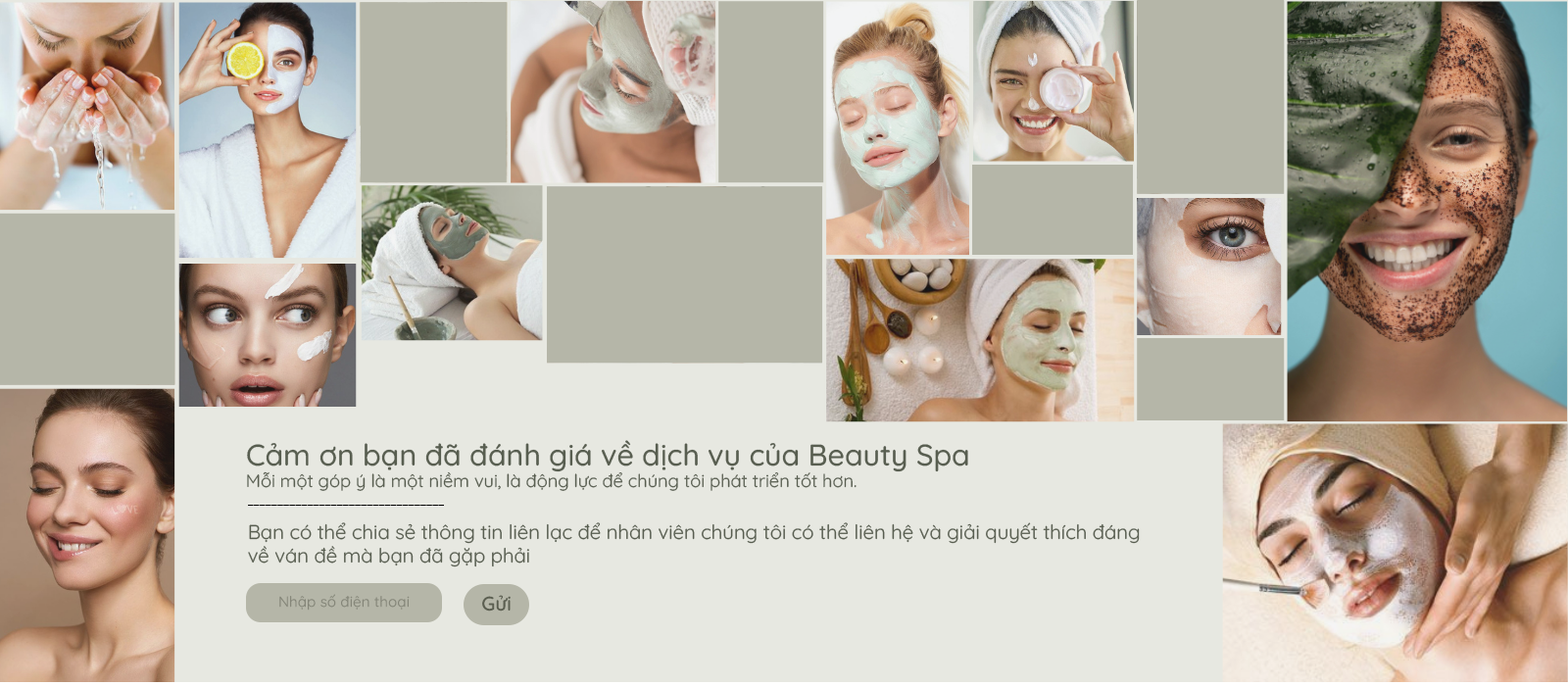
<style>
.page{position:relative;width:1568px;height:686px;background:#e7e8e1}
.page>*{position:absolute;margin:0}
.t1{font:17.9px "Quicksand-Regular";color:#585e50}
.t2{font:29.8px "Quicksand-Medium";color:#585e50}
.t3{font:19.9px "Quicksand-Regular";color:#585e50}
.t4{font:14.9px "Quicksand-Medium";color:#858679}
.t5{font:19.9px "Quicksand-SemiBold";color:#5b5e50}
</style>
<div class="page">
<p class="t1" style="left:247px;top:440px;width:721px;height:51px"><span class="t2">Cảm ơn bạn đã đánh giá về dịch vụ của Beauty Spa<br></span>Mỗi một góp ý là một niềm vui, là động lực để chúng tôi phát triển tốt hơn.</p>
<p class="t3" style="left:248px;top:522px;width:892px;height:45px">Bạn có thể chia sẻ thông tin liên lạc để nhân viên chúng tôi có thể liên hệ và giải quyết thích đáng <br>về ván đề mà bạn đã gặp phải</p>
<p class="t4" style="left:279px;top:594px;width:131px;height:17px">Nhập số điện thoại</p>
<p class="t5" style="left:482px;top:595px;width:29px;height:17px">Gửi</p>
</div>
